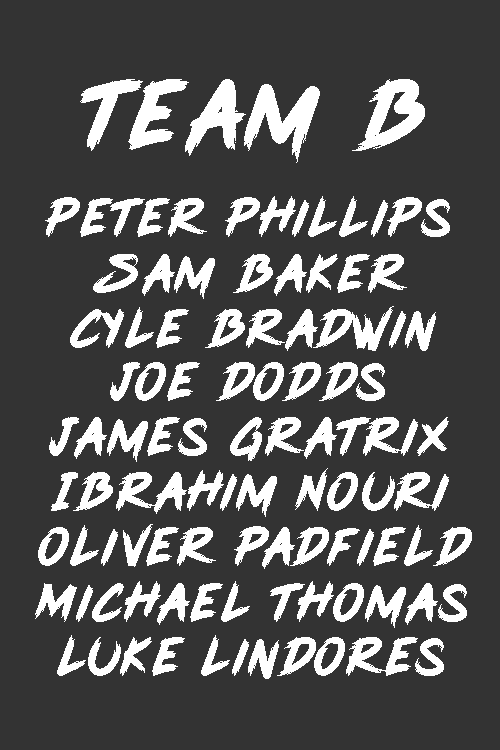
<style>
.page{position:relative;width:500px;height:750px;background:#333333}
.page>*{position:absolute;margin:0}
.t1{font:108px "PinkBlue";letter-spacing:0.06em;color:#ffffff}
.t2{font:59px "PinkBlue";letter-spacing:0.06em;color:#ffffff}
</style>
<div class="page">
<p class="t1" style="left:80px;top:79px;width:345px;height:84px">Team B</p>
<p class="t2" style="left:45px;top:196px;width:405px;height:41px">Peter Phillips</p>
<p class="t2" style="left:93px;top:254px;width:314px;height:45px">Sam Baker</p>
<p class="t2" style="left:70px;top:306px;width:366px;height:45px">Cyle Bradwin</p>
<p class="t2" style="left:110px;top:362px;width:275px;height:39px">Joe Dodds</p>
<p class="t2" style="left:49px;top:417px;width:400px;height:45px">James Gratrix</p>
<p class="t2" style="left:51px;top:468px;width:398px;height:49px">Ibrahim Nouri</p>
<p class="t2" style="left:38px;top:524px;width:434px;height:45px">Oliver Padfield</p>
<p class="t2" style="left:35px;top:581px;width:432px;height:47px">Michael Thomas</p>
<p class="t2" style="left:57px;top:635px;width:387px;height:44px">Luke Lindores</p>
</div>
